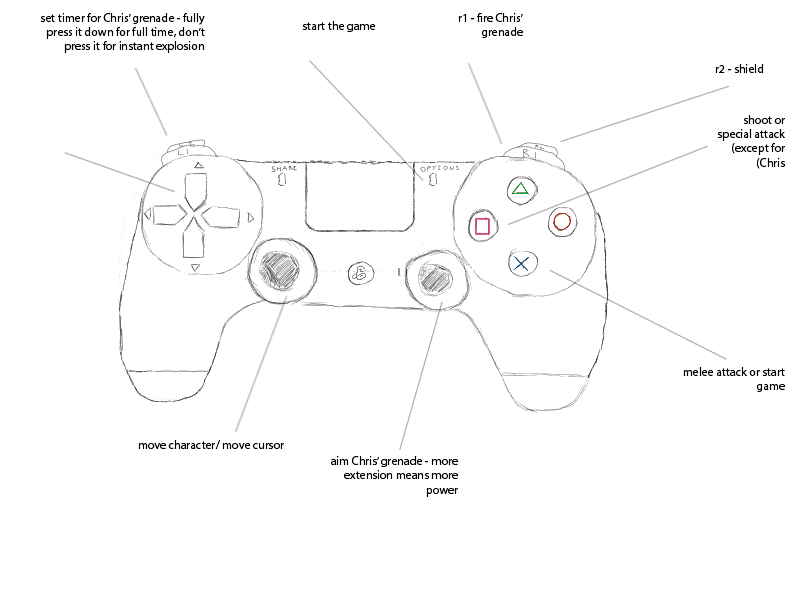
<style>
.page{position:relative;width:800px;height:600px;background:#ffffff}
.page>*{position:absolute;margin:0}
.t1{font:12px "MyriadHebrew-Regular";color:#000000}
</style>
<div class="page">
<p class="t1" style="left:40px;top:13px;width:165px;height:40px">set timer for Chris’ grenade - fully press it down for full time, don’t press it for instant explosion</p>
<p class="t1" style="left:458px;top:13px;width:66px;height:25px">r1 - fire Chris’ grenade</p>
<p class="t1" style="left:302px;top:21px;width:74px;height:11px">start the game</p>
<p class="t1" style="left:715px;top:64px;width:49px;height:9px">r2 - shield</p>
<p class="t1" style="left:717px;top:115px;width:69px;height:54px">shoot or special attack (except for Chris)</p>
<p class="t1" style="left:683px;top:367px;width:103px;height:25px">melee attack or start game</p>
<p class="t1" style="left:138px;top:440px;width:146px;height:9px">move character/ move cursor</p>
<p class="t1" style="left:330px;top:456px;width:129px;height:41px">aim Chris’ grenade - more extension means more power</p>
</div>
